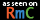
<style>
.page{position:relative;width:40px;height:20px;background:#000000}
.page>*{position:absolute;margin:0}
.t1{font:8px "MyriadPro-Regular";color:#fefefe}
.t2{font:14.3px "Monaco";color:#ee5c2e;font-weight:bold;scale:1.09 1}
.t3{font:14.3px "Monaco";color:#3387cc;font-weight:bold;scale:1.09 1}
.t4{font:14.3px "Monaco";color:#65b042;font-weight:bold;scale:1.09 1}
</style>
<div class="page">
<p class="t1" style="left:2px;top:2px;width:36px;height:4px">as seen on</p>
<p class="t2" style="left:6px;top:7px;width:28px;height:12px">R<span class="t3">m</span><span class="t4">C</span></p>
</div>
